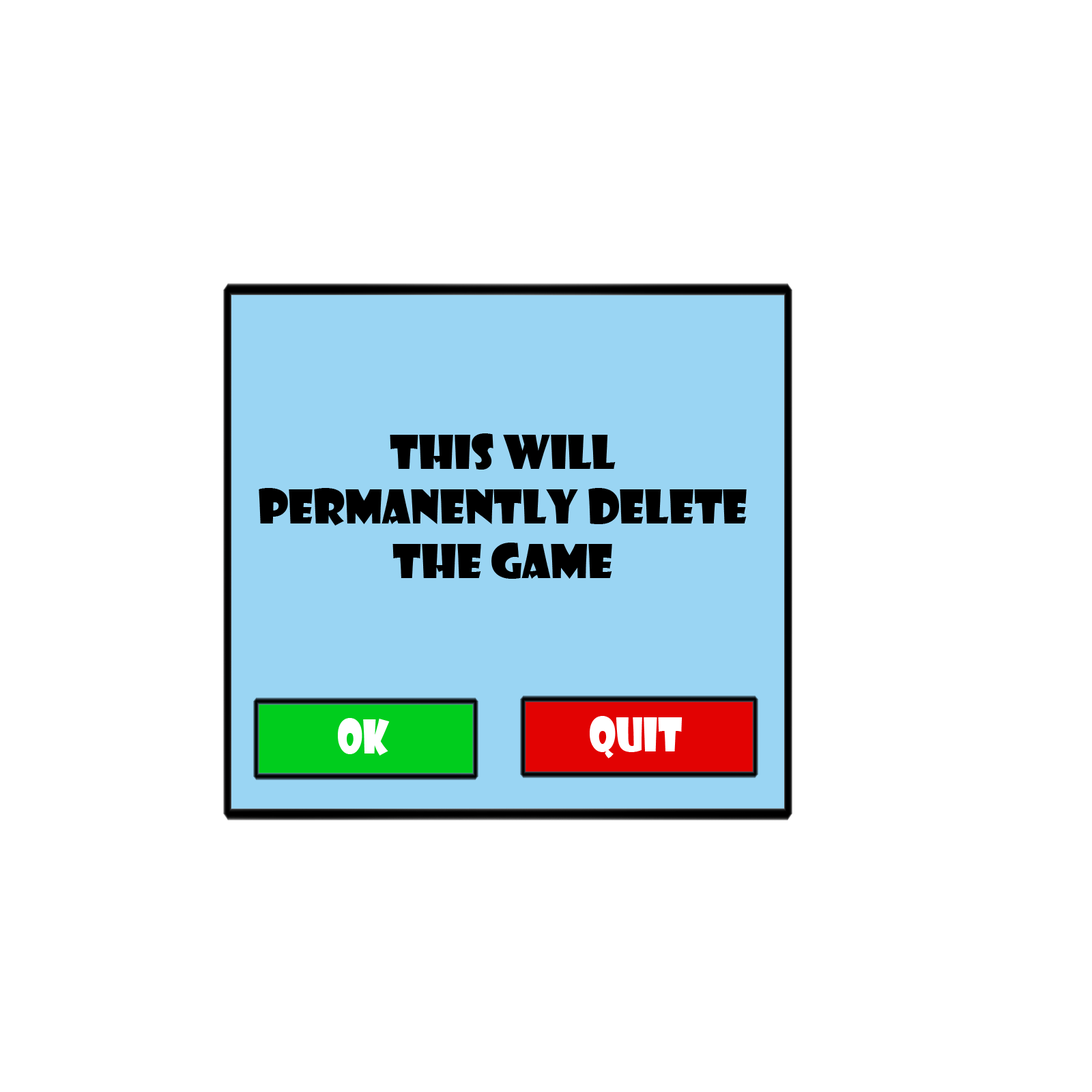
<style>
.page{position:relative;width:1092px;height:1092px;background:#ffffff}
.page>*{position:absolute;margin:0}
.t1{font:45.5px "ShowcardGothic-Reg";color:#000000}
.t2{font:45.5px "ShowcardGothic-Reg";color:#ffffff;scale:0.81 1}
.t3{font:45.5px "ShowcardGothic-Reg";color:#ffffff;scale:0.85 1}
</style>
<div class="page">
<p class="t1" style="left:259px;top:433px;width:488px;height:146px;text-align:center">This will <br>permanently delete the game</p>
<p class="t2" style="left:338px;top:718px;width:52px;height:38px">ok</p>
<p class="t3" style="left:590px;top:716px;width:92px;height:42px">Quit</p>
</div>
